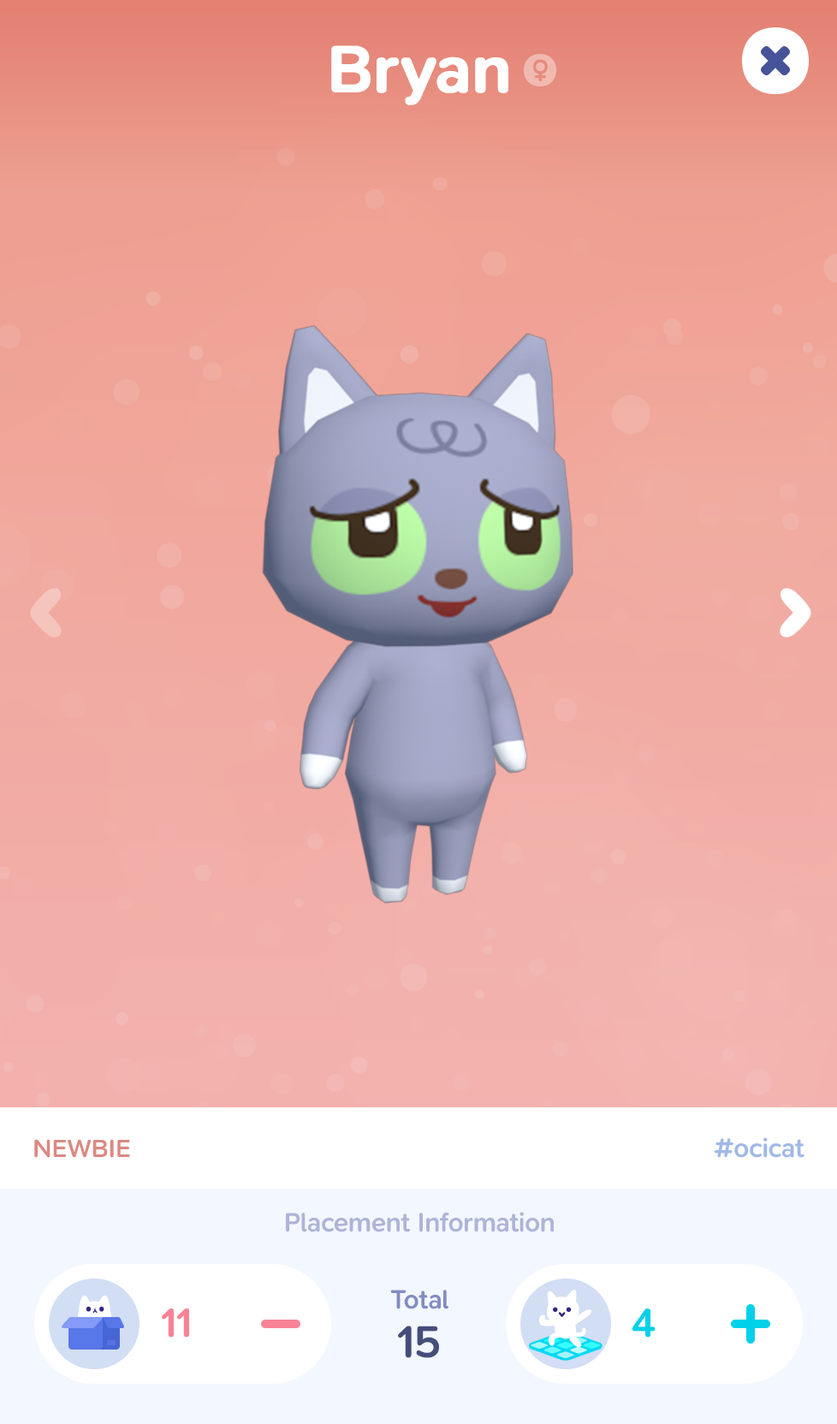
<style>
.page{position:relative;width:837px;height:1424px}
.page>*{position:absolute;margin:0}
.t1{font:68.5px "SNPro-SemiBold";letter-spacing:-0.01em;color:#ffffff;font-weight:bold}
.t2{font:25.7px "SNPro-SemiBold";letter-spacing:-0.01em;color:#db8982;text-transform:uppercase}
.t3{font:27.4px "SNPro-SemiBold";letter-spacing:-0.01em;color:#a0b9e6}
.t4{font:27.4px "SNPro-SemiBold";letter-spacing:-0.01em;color:#adb4d7}
.t5{font:27.4px "SNPro-SemiBold";letter-spacing:-0.01em;color:#818cc2}
.t6{font:41.7px "SNPro-SemiBold";letter-spacing:-0.01em;color:#f88296}
.t7{font:41.7px "SNPro-SemiBold";letter-spacing:-0.01em;color:#00d0e9}
.t8{font:46.2px "SNPro-SemiBold";letter-spacing:-0.01em;color:#454e7b}
</style>
<div class="page">
<p class="t1" style="left:331px;top:45px;width:177px;height:60px">Bryan</p>
<p class="t2" style="left:34px;top:1139px;width:96px;height:19px">Newbie</p>
<p class="t3" style="left:715px;top:1138px;width:90px;height:20px">#ocicat</p>
<p class="t4" style="left:286px;top:1212px;width:268px;height:21px">Placement Information</p>
<p class="t5" style="left:390px;top:1290px;width:59px;height:20px">Total</p>
<p class="t6" style="left:162px;top:1309px;width:27px;height:29px">11</p>
<p class="t7" style="left:632px;top:1309px;width:24px;height:29px">4</p>
<p class="t8" style="left:398px;top:1326px;width:41px;height:32px">15</p>
</div>
